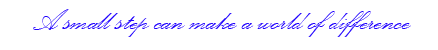
<style>
.page{position:relative;width:438px;height:50px;background:#ffffff}
.page>*{position:absolute;margin:0}
.t1{font:37.5px "PalaceScriptMT";color:#2002ff}
</style>
<div class="page">
<p class="t1" style="left:33px;top:9px;width:378px;height:28px">A small step can make a world of difference</p>
</div>
